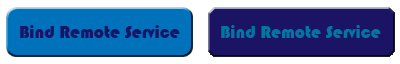
<style>
.page{position:relative;width:400px;height:64px;background:#1b1464}
.page>*{position:absolute;margin:0}
.t1{font:18px "Bauhaus93";color:#1b1464}
.t2{font:18px "Bauhaus93";color:#0076a3}
</style>
<div class="page">
<p class="t1" style="left:20px;top:25px;width:160px;height:14px">Bind Remote Service</p>
<p class="t2" style="left:221px;top:25px;width:160px;height:14px">Bind Remote Service</p>
</div>
